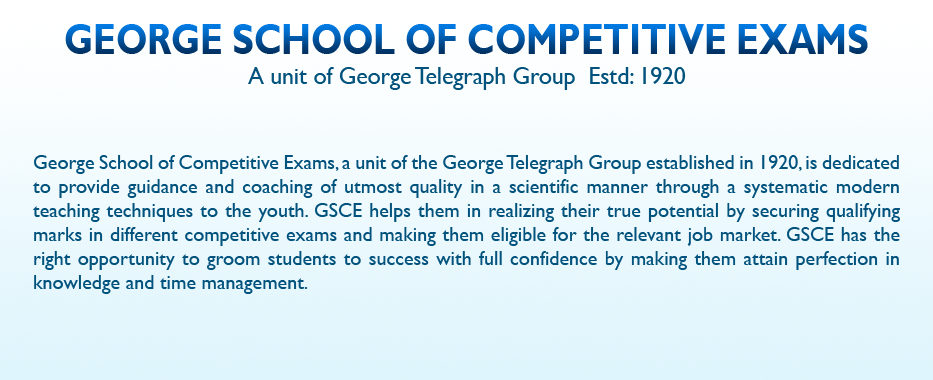
<style>
.page{position:relative;width:933px;height:380px}
.page>*{position:absolute;margin:0}
.t1{font:43.3px "GillSansMT-Bold";scale:0.82 1}
.t2{font:23.6px "GillSansMT";color:#01527c}
.t3{font:20px "GillSansMT";color:#01527c}
</style>
<div class="page">
<p class="t1" style="left:65px;top:24px;width:803px;height:30px">GEORGE SCHOOL OF COMPETITIVE EXAMS</p>
<p class="t2" style="left:248px;top:67px;width:438px;height:23px">A unit of George Telegraph Group  Estd: 1920</p>
<p class="t3" style="left:33px;top:155px;width:867px;height:139px;text-align:justify">George School of Competitive Exams, a unit of the George Telegraph Group established in 1920, is dedicated to provide guidance and coaching of utmost quality in a scientific manner through a systematic modern teaching techniques to the youth. GSCE helps them in realizing their true potential by securing qualifying marks in different competitive exams and making them eligible for the relevant job market. GSCE has the right opportunity to groom students to success with full confidence by making them attain perfection in knowledge and time management.</p>
</div>
